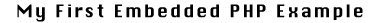
<style>
.page{position:relative;width:380px;height:23px;background:#ffffff}
.page>*{position:absolute;margin:0}
.t1{font:17px "Chicago";letter-spacing:0.1em;color:#000000}
</style>
<div class="page">
<p class="t1" style="left:17px;top:4px;width:346px;height:18px">My First Embedded PHP Example</p>
</div>
